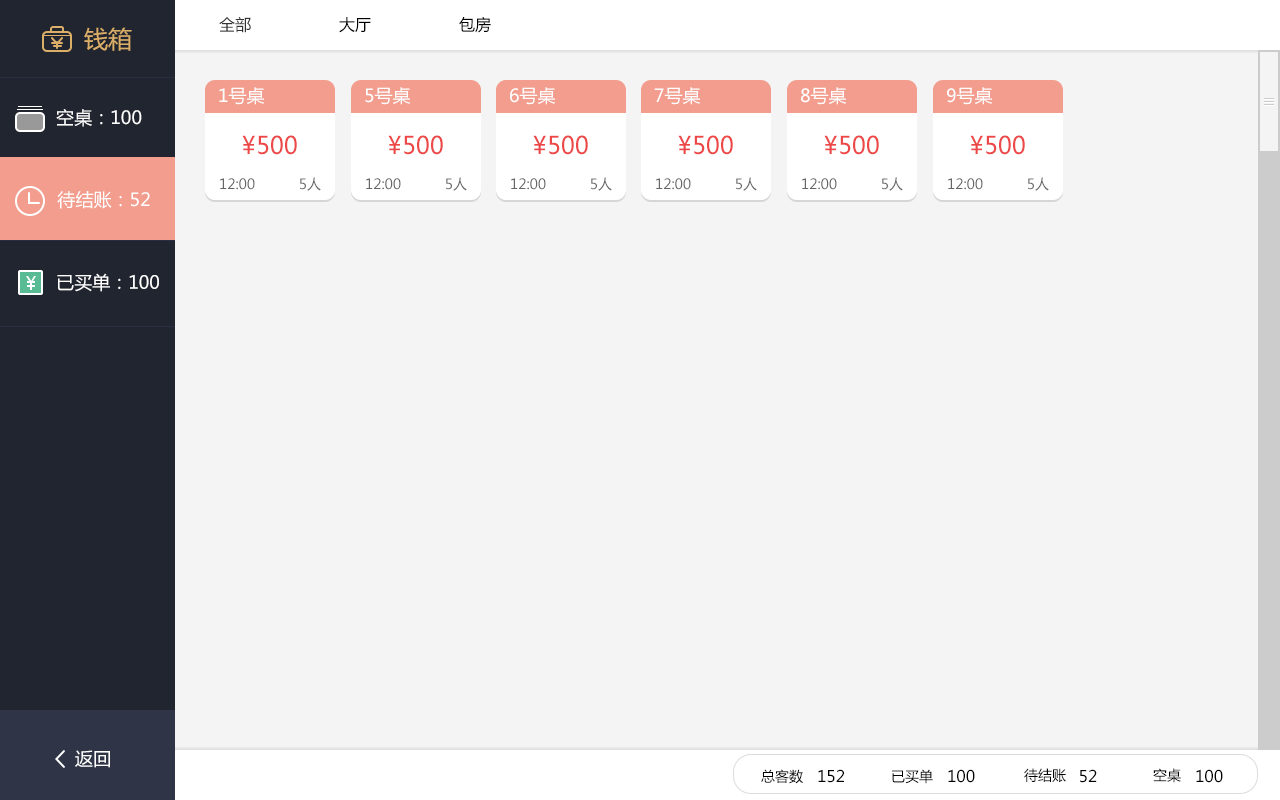
<style>
.page{position:relative;width:1280px;height:800px;background:#f4f4f4}
.page>*{position:absolute;margin:0}
.t1{font:16px "MicrosoftYaHei";color:#333333}
.t2{font:16px "MicrosoftYaHei";color:#000000}
.t3{font:24px "MicrosoftYaHei";color:#dcaf69}
.t4{font:18px "MicrosoftYaHei";color:#ffffff}
.t5{font:24px "MicrosoftYaHei";color:#ec4848}
.t6{font:14px "MicrosoftYaHei";color:#666666}
.t7{font:14px "MicrosoftYaHei";color:#000000}
</style>
<div class="page">
<p class="t1" style="left:219px;top:17px;width:32px;height:16px">全部</p>
<p class="t2" style="left:339px;top:17px;width:32px;height:16px">大厅</p>
<p class="t2" style="left:459px;top:17px;width:32px;height:16px">包房</p>
<p class="t3" style="left:84px;top:27px;width:48px;height:24px">钱箱</p>
<p class="t4" style="left:219px;top:87px;width:46px;height:18px">1号桌</p>
<p class="t4" style="left:365px;top:87px;width:46px;height:18px">5号桌</p>
<p class="t4" style="left:510px;top:87px;width:46px;height:18px">6号桌</p>
<p class="t4" style="left:654px;top:87px;width:47px;height:18px">7号桌</p>
<p class="t4" style="left:801px;top:87px;width:46px;height:18px">8号桌</p>
<p class="t4" style="left:947px;top:87px;width:46px;height:18px">9号桌</p>
<p class="t4" style="left:56px;top:109px;width:86px;height:18px">空桌：100</p>
<p class="t5" style="left:242px;top:135px;width:55px;height:20px">¥500</p>
<p class="t5" style="left:388px;top:135px;width:55px;height:20px">¥500</p>
<p class="t5" style="left:533px;top:135px;width:55px;height:20px">¥500</p>
<p class="t5" style="left:678px;top:135px;width:55px;height:20px">¥500</p>
<p class="t5" style="left:824px;top:135px;width:55px;height:20px">¥500</p>
<p class="t5" style="left:970px;top:135px;width:55px;height:20px">¥500</p>
<p class="t6" style="left:220px;top:178px;width:35px;height:12px">12:00</p>
<p class="t6" style="left:300px;top:177px;width:21px;height:14px">5人</p>
<p class="t6" style="left:366px;top:178px;width:35px;height:12px">12:00</p>
<p class="t6" style="left:446px;top:177px;width:21px;height:14px">5人</p>
<p class="t6" style="left:511px;top:178px;width:35px;height:12px">12:00</p>
<p class="t6" style="left:591px;top:177px;width:21px;height:14px">5人</p>
<p class="t6" style="left:656px;top:178px;width:35px;height:12px">12:00</p>
<p class="t6" style="left:736px;top:177px;width:21px;height:14px">5人</p>
<p class="t6" style="left:802px;top:178px;width:35px;height:12px">12:00</p>
<p class="t6" style="left:882px;top:177px;width:21px;height:14px">5人</p>
<p class="t6" style="left:948px;top:178px;width:35px;height:12px">12:00</p>
<p class="t6" style="left:1028px;top:177px;width:21px;height:14px">5人</p>
<p class="t4" style="left:57px;top:191px;width:93px;height:18px">待结账：52</p>
<p class="t4" style="left:57px;top:273px;width:102px;height:19px">已买单：100</p>
<p class="t4" style="left:75px;top:750px;width:35px;height:18px">返回</p>
<p class="t7" style="left:761px;top:769px;width:42px;height:15px">总客数</p>
<p class="t2" style="left:818px;top:769px;width:26px;height:14px">152</p>
<p class="t7" style="left:892px;top:769px;width:41px;height:15px">已买单</p>
<p class="t2" style="left:948px;top:769px;width:27px;height:14px">100</p>
<p class="t7" style="left:1024px;top:768px;width:42px;height:14px">待结账</p>
<p class="t2" style="left:1080px;top:769px;width:17px;height:14px">52</p>
<p class="t7" style="left:1153px;top:768px;width:28px;height:15px">空桌</p>
<p class="t2" style="left:1196px;top:769px;width:27px;height:14px">100</p>
</div>
